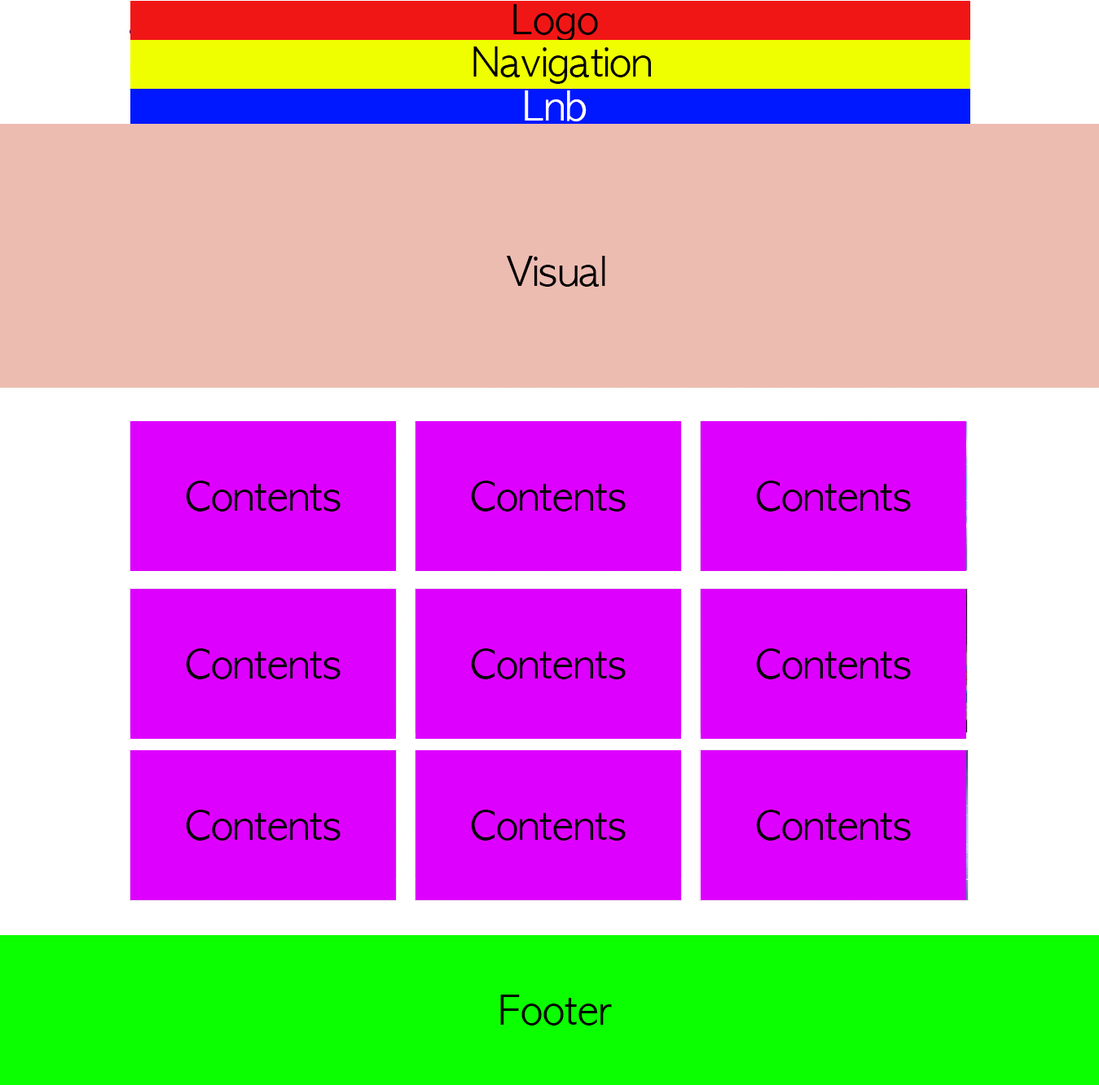
<style>
.page{position:relative;width:1099px;height:1085px;background:#de00ff}
.page>*{position:absolute;margin:0}
.t1{font:38px "AppleGothic";color:#000000}
.t2{font:38px "AppleGothic";color:#ffffff}
</style>
<div class="page">
<p class="t1" style="left:513px;top:4px;width:85px;height:38px">Logo</p>
<p class="t1" style="left:473px;top:46px;width:178px;height:38px">Navigation</p>
<p class="t2" style="left:525px;top:90px;width:62px;height:31px">Lnb</p>
<p class="t1" style="left:506px;top:256px;width:99px;height:31px">Visual</p>
<p class="t1" style="left:186px;top:481px;width:155px;height:31px">Contents</p>
<p class="t1" style="left:471px;top:481px;width:155px;height:31px">Contents</p>
<p class="t1" style="left:756px;top:481px;width:155px;height:31px">Contents</p>
<p class="t1" style="left:186px;top:648px;width:155px;height:31px">Contents</p>
<p class="t1" style="left:471px;top:648px;width:155px;height:31px">Contents</p>
<p class="t1" style="left:756px;top:648px;width:155px;height:31px">Contents</p>
<p class="t1" style="left:186px;top:810px;width:155px;height:31px">Contents</p>
<p class="t1" style="left:471px;top:810px;width:155px;height:31px">Contents</p>
<p class="t1" style="left:756px;top:810px;width:155px;height:31px">Contents</p>
<p class="t1" style="left:500px;top:995px;width:112px;height:31px">Footer</p>
</div>
